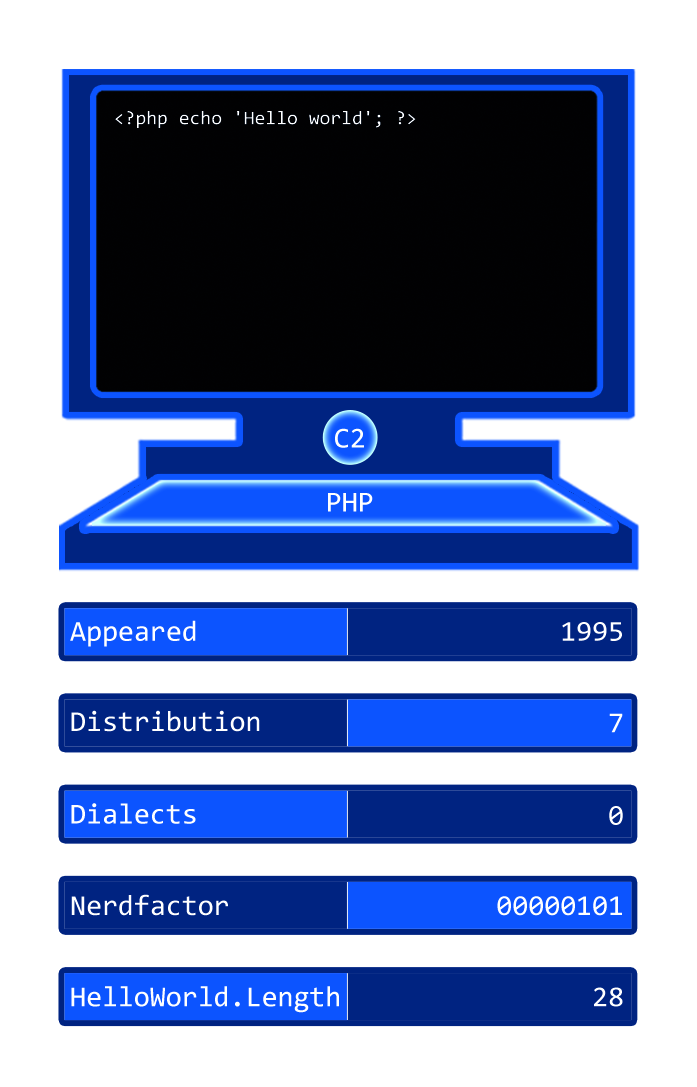
<style>
.page{position:relative;width:697px;height:1087px;background:#ffffff}
.page>*{position:absolute;margin:0}
.t1{font:19.3px "Consolas";color:#ffffff}
.t2{font:29px "Consolas";color:#ffffff}
</style>
<div class="page">
<p class="t1" style="left:115px;top:111px;width:301px;height:17px">&lt;?php echo 'Hello world'; ?&gt;</p>
<p class="t2" style="left:335px;top:428px;width:29px;height:20px">C2</p>
<p class="t2" style="left:328px;top:493px;width:45px;height:19px">PHP</p>
<p class="t2" style="left:70px;top:620px;width:126px;height:27px">Appeared</p>
<p class="t2" style="left:562px;top:622px;width:60px;height:19px">1995</p>
<p class="t2" style="left:71px;top:710px;width:189px;height:22px">Distribution</p>
<p class="t2" style="left:609px;top:713px;width:14px;height:20px">7</p>
<p class="t2" style="left:71px;top:803px;width:125px;height:21px">Dialects</p>
<p class="t2" style="left:609px;top:806px;width:14px;height:19px">0</p>
<p class="t2" style="left:71px;top:894px;width:157px;height:22px">Nerdfactor</p>
<p class="t2" style="left:497px;top:896px;width:125px;height:20px">00000101</p>
<p class="t2" style="left:71px;top:986px;width:268px;height:27px">HelloWorld.Length</p>
<p class="t2" style="left:594px;top:987px;width:29px;height:20px">28</p>
</div>
